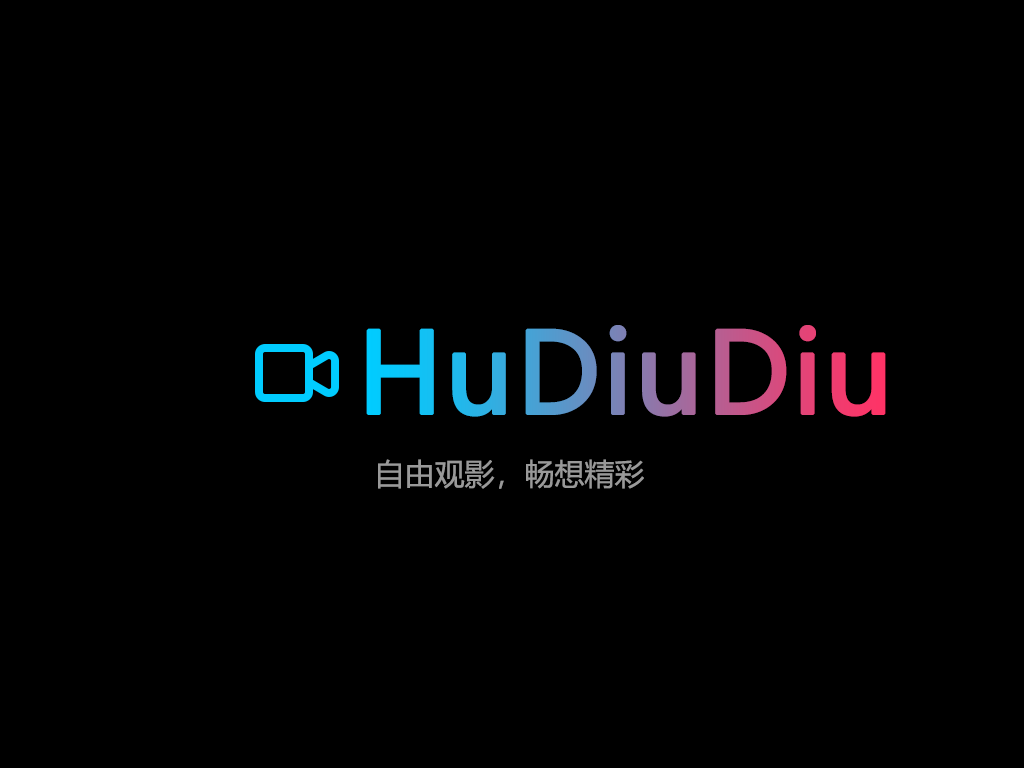
<style>
.page{position:relative;width:1024px;height:768px;background:#000000}
.page>*{position:absolute;margin:0}
.t1{font:110px "MicrosoftYaHei";font-weight:bold}
.t2{font:30px "MicrosoftYaHei";color:#999999}
</style>
<div class="page">
<p class="t1" style="left:366px;top:325px;width:520px;height:92px">HuDiuDiu</p>
<p class="t2" style="left:378px;top:459px;width:266px;height:30px">自由观影，畅想精彩</p>
</div>
